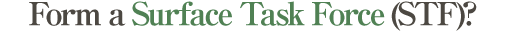
<style>
.page{position:relative;width:505px;height:31px;background:#ffffff}
.page>*{position:absolute;margin:0}
.t1{font:32px "RyuminPro-ExBold";letter-spacing:-0.08em;color:#508154}
.t2{font:32px "RyuminPro-ExBold";letter-spacing:-0.08em;color:#4c4842}
</style>
<div class="page">
<p class="t1" style="left:29px;top:1px;width:448px;height:30px"><span class="t2">Form a </span>Surface Task Force<span class="t2"> (STF)?</span></p>
</div>
